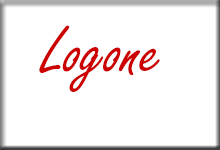
<style>
.page{position:relative;width:220px;height:150px;background:#ffffff}
.page>*{position:absolute;margin:0}
.t1{font:75px "FreestyleScript-Regular";color:#cc0000}
</style>
<div class="page">
<p class="t1" style="left:39px;top:25px;width:121px;height:67px">Logone</p>
</div>
